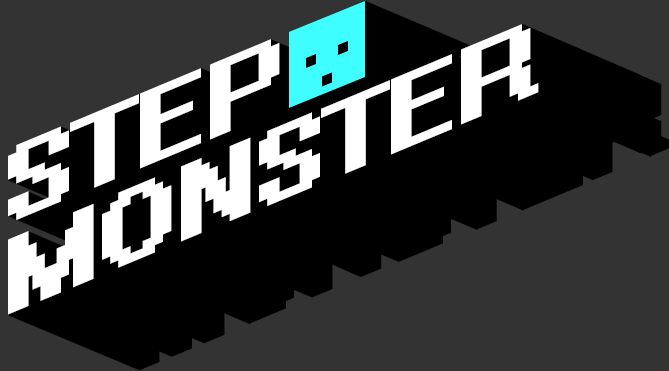
<style>
.page{position:relative;width:669px;height:371px;background:#333333}
.page>*{position:absolute;margin:0}
.t1{font:117px/90px "System";letter-spacing:-0.025em;color:#ffffff;text-transform:uppercase;font-weight:bold;scale:1.2 1}
</style>
<div class="page">
<p class="t1" style="left:8px;top:24px;width:531px;height:291px;rotate:-23deg">STEP<br>monster</p>
</div>
